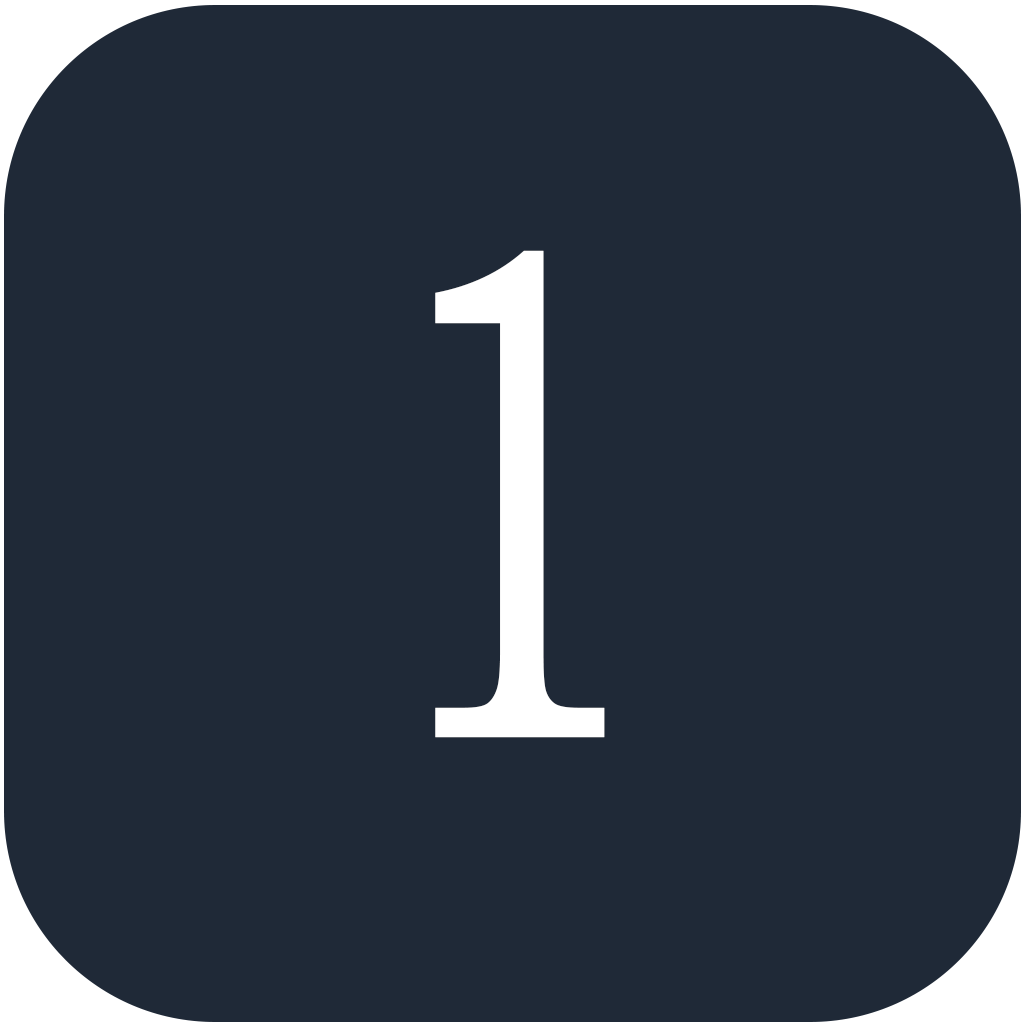
<style>
.page{position:relative;width:1024px;height:1024px;background:#1f2937}
.page>*{position:absolute;margin:0}
.t1{font:713.2px "BookmanOldStyle";color:#ffffff;font-weight:bold;scale:0.73 1}
</style>
<div class="page">
<p class="t1" style="left:435px;top:250px;width:170px;height:488px">1</p>
</div>
